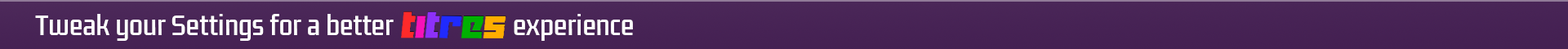
<style>
.page{position:relative;width:1568px;height:49px}
.page>*{position:absolute;margin:0}
.t1{font:24.5px "KdamThmorPro-Regular";color:#ffffff}
</style>
<div class="page">
<p class="t1" style="left:35px;top:14px;width:359px;height:27px">Tweak your Settings for a better</p>
<p class="t1" style="left:514px;top:14px;width:119px;height:27px">experience</p>
</div>
